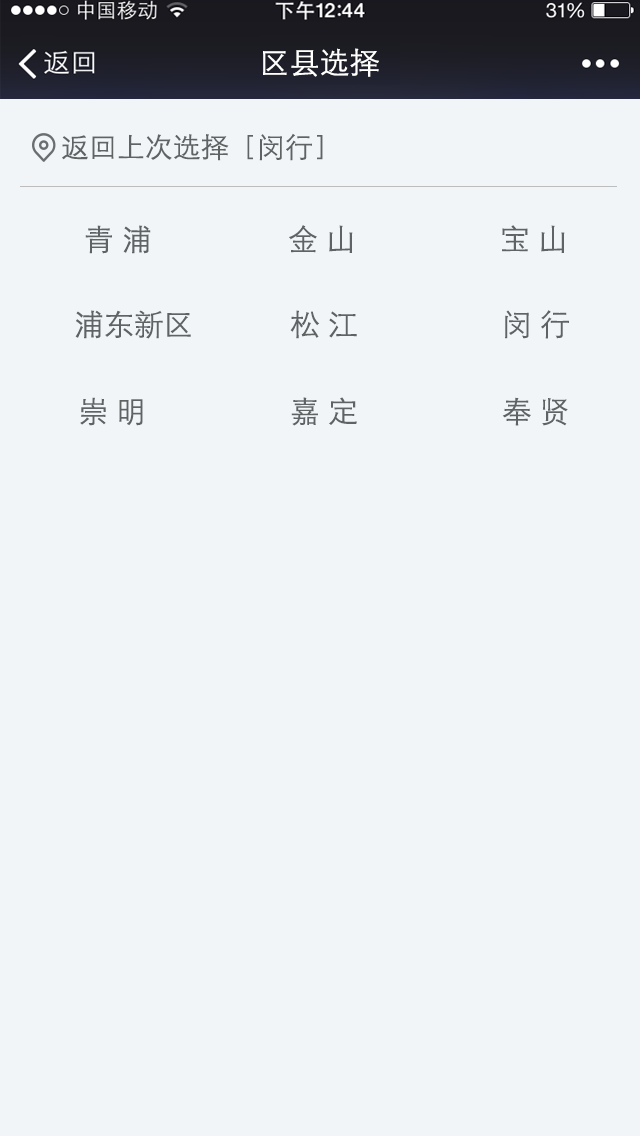
<style>
.page{position:relative;width:640px;height:1136px;background:#f1f5f8}
.page>*{position:absolute;margin:0}
.t1{font:30px "STHeitiSC-Light";color:#ffffff}
.t2{font:28px "STHeitiSC-Light";color:#5f6364}
.t3{font:30px "STHeitiSC-Light";color:#5f6364}
</style>
<div class="page">
<p class="t1" style="left:263px;top:48px;width:116px;height:29px">区县选择</p>
<p class="t2" style="left:62px;top:133px;width:261px;height:28px">返回上次选择［闵行］</p>
<p class="t3" style="left:85px;top:225px;width:480px;height:29px">青 浦                 金 山                  宝 山</p>
<p class="t3" style="left:75px;top:310px;width:494px;height:29px">浦东新区            松 江                  闵 行</p>
<p class="t3" style="left:80px;top:397px;width:488px;height:29px">崇 明                  嘉 定                  奉 贤</p>
</div>
